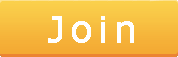
<style>
.page{position:relative;width:178px;height:57px}
.page>*{position:absolute;margin:0}
.t1{font:36px "Tahoma";letter-spacing:0.2em;color:#ffffff;font-weight:bold}
</style>
<div class="page">
<p class="t1" style="left:48px;top:16px;width:86px;height:27px">Join</p>
</div>
